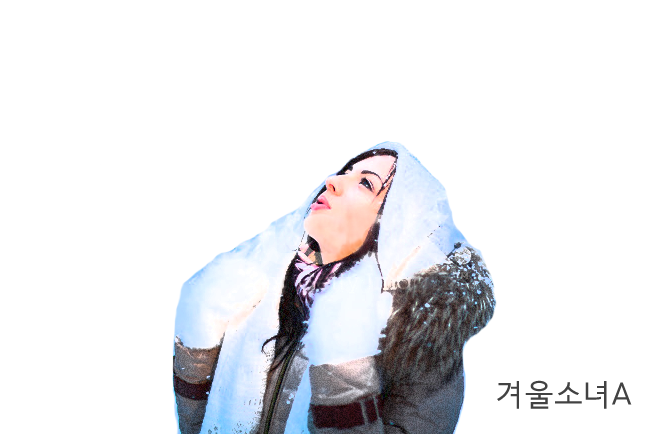
<style>
.page{position:relative;width:656px;height:434px;background:#ffffff}
.page>*{position:absolute;margin:0}
.t1{font:30px "HCRDotum";color:#424242}
</style>
<div class="page">
<p class="t1" style="left:497px;top:380px;width:135px;height:29px">겨울소녀A</p>
</div>
